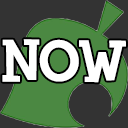
<style>
.page{position:relative;width:128px;height:128px;background:#333333}
.page>*{position:absolute;margin:0}
.t1{font:60px "FinkHeavy";letter-spacing:-0.05em;color:#ffffff;font-variant:small-caps;font-weight:bold}
</style>
<div class="page">
<p class="t1" style="left:2px;top:39px;width:124px;height:44px">NOW</p>
</div>
